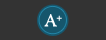
<style>
.page{position:relative;width:106px;height:40px;background:#333333}
.page>*{position:absolute;margin:0}
.t1{font:15.9px "Byington";color:#ffffff}
</style>
<div class="page">
<p class="t1" style="left:44px;top:14px;width:18px;height:13px">A+</p>
</div>
